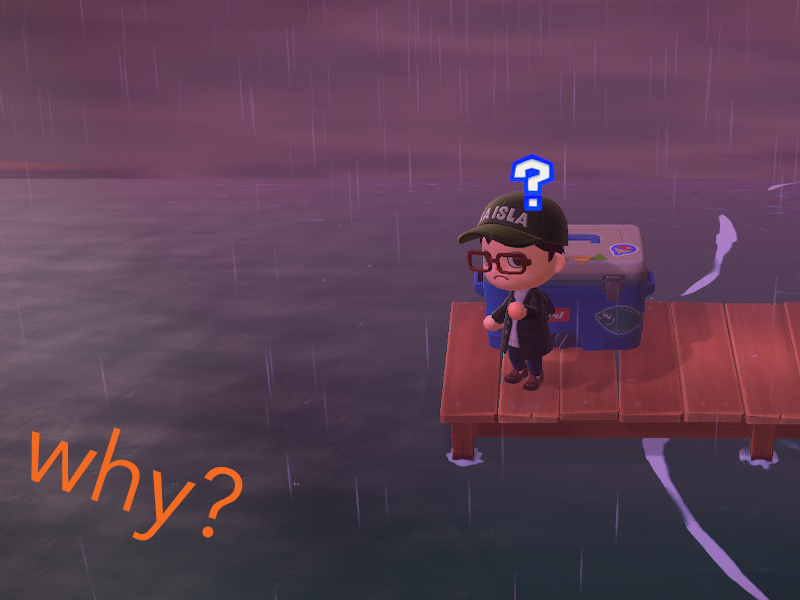
<style>
.page{position:relative;width:800px;height:600px}
.page>*{position:absolute;margin:0}
.t1{font:100px "Avenir-Book";color:#f36b21}
</style>
<div class="page">
<p class="t1" style="left:31px;top:427px;width:212px;height:114px;rotate:18deg">why?</p>
</div>
